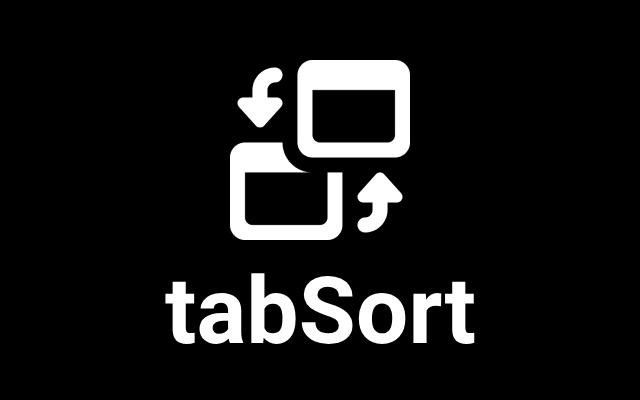
<style>
.page{position:relative;width:640px;height:400px;background:#000000}
.page>*{position:absolute;margin:0}
.t1{font:93px "Roboto-Bold";color:#ffffff}
</style>
<div class="page">
<p class="t1" style="left:165px;top:273px;width:310px;height:71px">tabSort</p>
</div>
